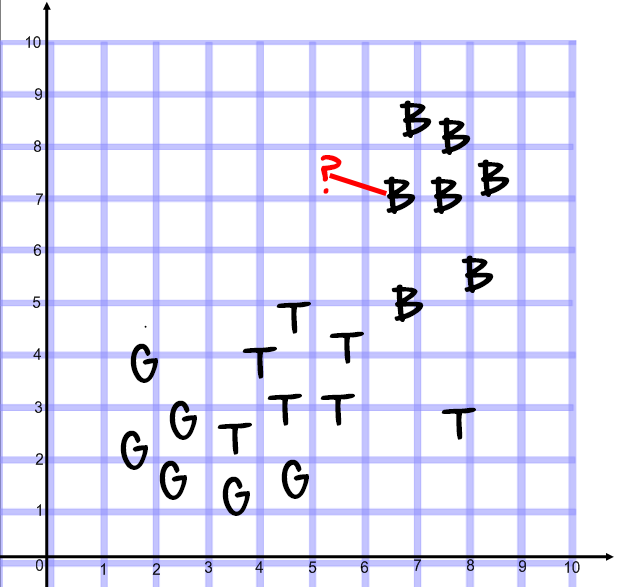
<style>
.page{position:relative;width:631px;height:587px;background:#ffffff}
.page>*{position:absolute;margin:0}
.t1{font:36px "HandOfSean";color:#000000}
.t2{font:36px "HandOfSean";color:#ff0000}
</style>
<div class="page">
<p class="t1" style="left:399px;top:100px;width:33px;height:38px">B</p>
<p class="t1" style="left:438px;top:117px;width:33px;height:38px">B</p>
<p class="t2" style="left:320px;top:155px;width:22px;height:39px">?</p>
<p class="t1" style="left:477px;top:159px;width:33px;height:38px">B</p>
<p class="t1" style="left:383px;top:176px;width:33px;height:38px">B</p>
<p class="t1" style="left:430px;top:176px;width:33px;height:38px">B</p>
<p class="t1" style="left:461px;top:255px;width:33px;height:38px">B</p>
<p class="t1" style="left:391px;top:284px;width:33px;height:38px">B</p>
<p class="t1" style="left:276px;top:301px;width:35px;height:33px">T</p>
<p class="t1" style="left:329px;top:331px;width:35px;height:33px">T</p>
<p class="t1" style="left:130px;top:343px;width:28px;height:40px">G</p>
<p class="t1" style="left:242px;top:346px;width:35px;height:33px">T</p>
<p class="t1" style="left:169px;top:400px;width:28px;height:40px">G</p>
<p class="t1" style="left:267px;top:393px;width:35px;height:33px">T</p>
<p class="t1" style="left:320px;top:393px;width:35px;height:33px">T</p>
<p class="t1" style="left:441px;top:407px;width:35px;height:33px">T</p>
<p class="t1" style="left:217px;top:422px;width:35px;height:33px">T</p>
<p class="t1" style="left:120px;top:430px;width:28px;height:40px">G</p>
<p class="t1" style="left:159px;top:460px;width:28px;height:40px">G</p>
<p class="t1" style="left:281px;top:459px;width:28px;height:40px">G</p>
<p class="t1" style="left:222px;top:476px;width:28px;height:40px">G</p>
</div>
